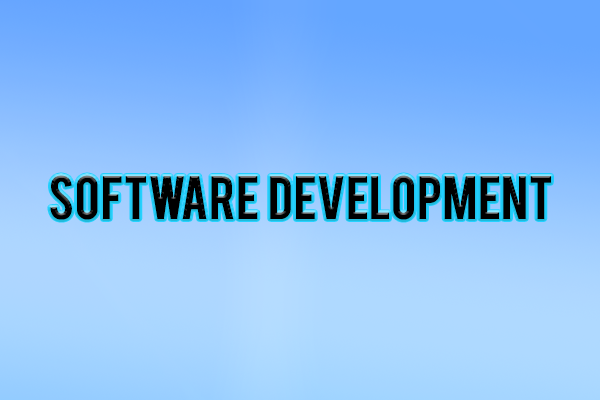
<style>
.page{position:relative;width:600px;height:400px}
.page>*{position:absolute;margin:0}
.t1{font:48px "Bebas";color:#000000;text-transform:uppercase}
</style>
<div class="page">
<p class="t1" style="left:50px;top:175px;width:501px;height:45px">Software  development</p>
</div>
